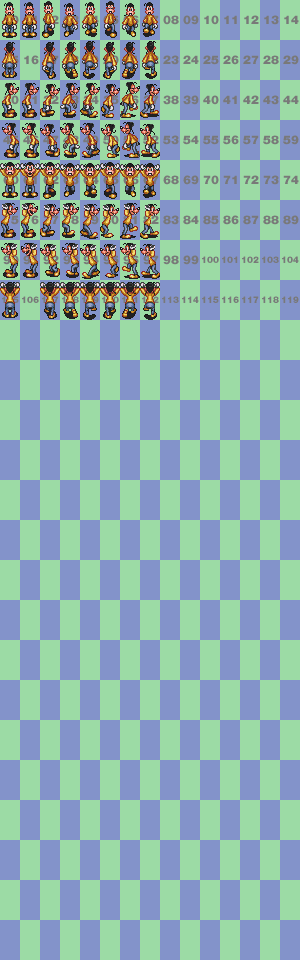
<style>
.page{position:relative;width:300px;height:960px;background:#9cdba5}
.page>*{position:absolute;margin:0}
.t1{font:12px "HelveticaNeueCE-Black"}
.t2{font:12px "HelveticaNeueCE-Black";color:#797979}
.t3{font:9px "HelveticaNeueCE-Black";color:#797979}
</style>
<div class="page">
<p class="t1" style="left:43px;top:15px;width:16px;height:10px">02</p>
<p class="t1" style="left:103px;top:15px;width:16px;height:10px">05</p>
<p class="t2" style="left:163px;top:15px;width:16px;height:10px">08</p>
<p class="t2" style="left:183px;top:15px;width:16px;height:10px">09</p>
<p class="t2" style="left:204px;top:15px;width:15px;height:10px">10</p>
<p class="t2" style="left:224px;top:15px;width:13px;height:9px">11</p>
<p class="t2" style="left:244px;top:15px;width:15px;height:9px">12</p>
<p class="t2" style="left:264px;top:15px;width:15px;height:10px">13</p>
<p class="t2" style="left:284px;top:15px;width:15px;height:9px">14</p>
<p class="t2" style="left:24px;top:55px;width:15px;height:10px">16</p>
<p class="t1" style="left:64px;top:55px;width:15px;height:10px">18</p>
<p class="t1" style="left:143px;top:55px;width:16px;height:9px">22</p>
<p class="t2" style="left:163px;top:55px;width:16px;height:10px">23</p>
<p class="t2" style="left:183px;top:55px;width:16px;height:9px">24</p>
<p class="t2" style="left:203px;top:55px;width:16px;height:10px">25</p>
<p class="t2" style="left:223px;top:55px;width:16px;height:10px">26</p>
<p class="t2" style="left:243px;top:55px;width:16px;height:9px">27</p>
<p class="t2" style="left:263px;top:55px;width:16px;height:10px">28</p>
<p class="t2" style="left:283px;top:55px;width:16px;height:10px">29</p>
<p class="t1" style="left:23px;top:95px;width:14px;height:10px">31</p>
<p class="t1" style="left:143px;top:95px;width:16px;height:10px">37</p>
<p class="t2" style="left:163px;top:95px;width:16px;height:10px">38</p>
<p class="t2" style="left:183px;top:95px;width:16px;height:10px">39</p>
<p class="t2" style="left:203px;top:95px;width:16px;height:10px">40</p>
<p class="t2" style="left:223px;top:95px;width:14px;height:9px">41</p>
<p class="t2" style="left:243px;top:95px;width:16px;height:9px">42</p>
<p class="t2" style="left:263px;top:95px;width:16px;height:10px">43</p>
<p class="t2" style="left:283px;top:95px;width:16px;height:9px">44</p>
<p class="t1" style="left:63px;top:135px;width:16px;height:10px">48</p>
<p class="t2" style="left:103px;top:135px;width:16px;height:10px">50</p>
<p class="t2" style="left:163px;top:135px;width:16px;height:10px">53</p>
<p class="t2" style="left:183px;top:135px;width:16px;height:10px">54</p>
<p class="t2" style="left:203px;top:135px;width:16px;height:10px">55</p>
<p class="t2" style="left:223px;top:135px;width:16px;height:10px">56</p>
<p class="t2" style="left:243px;top:135px;width:16px;height:10px">57</p>
<p class="t2" style="left:263px;top:135px;width:16px;height:10px">58</p>
<p class="t2" style="left:283px;top:135px;width:16px;height:10px">59</p>
<p class="t1" style="left:3px;top:175px;width:16px;height:10px">60</p>
<p class="t1" style="left:43px;top:175px;width:16px;height:10px">62</p>
<p class="t2" style="left:163px;top:175px;width:16px;height:10px">68</p>
<p class="t2" style="left:183px;top:175px;width:16px;height:10px">69</p>
<p class="t2" style="left:203px;top:175px;width:16px;height:10px">70</p>
<p class="t2" style="left:223px;top:175px;width:14px;height:9px">71</p>
<p class="t2" style="left:243px;top:175px;width:16px;height:9px">72</p>
<p class="t2" style="left:263px;top:175px;width:16px;height:10px">73</p>
<p class="t2" style="left:283px;top:175px;width:16px;height:9px">74</p>
<p class="t2" style="left:143px;top:215px;width:16px;height:10px">82</p>
<p class="t2" style="left:163px;top:215px;width:16px;height:10px">83</p>
<p class="t2" style="left:183px;top:215px;width:16px;height:10px">84</p>
<p class="t2" style="left:203px;top:215px;width:16px;height:10px">85</p>
<p class="t2" style="left:223px;top:215px;width:16px;height:10px">86</p>
<p class="t2" style="left:243px;top:215px;width:16px;height:10px">87</p>
<p class="t2" style="left:263px;top:215px;width:16px;height:10px">88</p>
<p class="t2" style="left:283px;top:215px;width:16px;height:10px">89</p>
<p class="t1" style="left:43px;top:255px;width:16px;height:10px">92</p>
<p class="t2" style="left:83px;top:255px;width:16px;height:10px">94</p>
<p class="t1" style="left:123px;top:255px;width:16px;height:10px">96</p>
<p class="t2" style="left:163px;top:255px;width:16px;height:10px">98</p>
<p class="t2" style="left:183px;top:255px;width:16px;height:10px">99</p>
<p class="t3" style="left:202px;top:256px;width:17px;height:7px">100</p>
<p class="t3" style="left:222px;top:256px;width:16px;height:7px">101</p>
<p class="t3" style="left:242px;top:256px;width:17px;height:7px">102</p>
<p class="t3" style="left:262px;top:256px;width:17px;height:7px">103</p>
<p class="t3" style="left:282px;top:256px;width:17px;height:7px">104</p>
<p class="t3" style="left:22px;top:296px;width:17px;height:7px">106</p>
<p class="t3" style="left:162px;top:296px;width:17px;height:7px">113</p>
<p class="t3" style="left:182px;top:296px;width:17px;height:7px">114</p>
<p class="t3" style="left:202px;top:296px;width:17px;height:7px">115</p>
<p class="t3" style="left:222px;top:296px;width:17px;height:7px">116</p>
<p class="t3" style="left:242px;top:296px;width:17px;height:7px">117</p>
<p class="t3" style="left:262px;top:296px;width:17px;height:7px">118</p>
<p class="t3" style="left:282px;top:296px;width:17px;height:7px">119</p>
</div>
